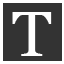
<style>
.page{position:relative;width:64px;height:64px;background:#333333}
.page>*{position:absolute;margin:0}
.t1{font:64px "Georgia";color:#ffffff}
</style>
<div class="page">
<p class="t1" style="left:12px;top:12px;width:40px;height:44px">T</p>
</div>
